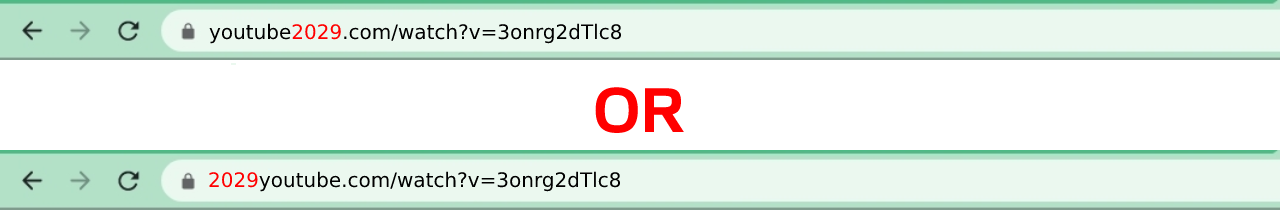
<style>
.page{position:relative;width:1280px;height:210px;background:#ffffff}
.page>*{position:absolute;margin:0}
.t1{font:20px "DejaVuSans";color:#000000}
.t2{font:20px "DejaVuSans";color:#ff0000}
.t3{font:61px "FamiliarPro-Bold";color:#ff0000}
</style>
<div class="page">
<p class="t1" style="left:209px;top:23px;width:413px;height:21px">youtube<span class="t2">2029</span>.com/watch?v=3onrg2dTlc8</p>
<p class="t3" style="left:595px;top:87px;width:89px;height:46px">OR</p>
<p class="t1" style="left:209px;top:171px;width:412px;height:21px"><span class="t2">2029</span>youtube.com/watch?v=3onrg2dTlc8</p>
</div>
